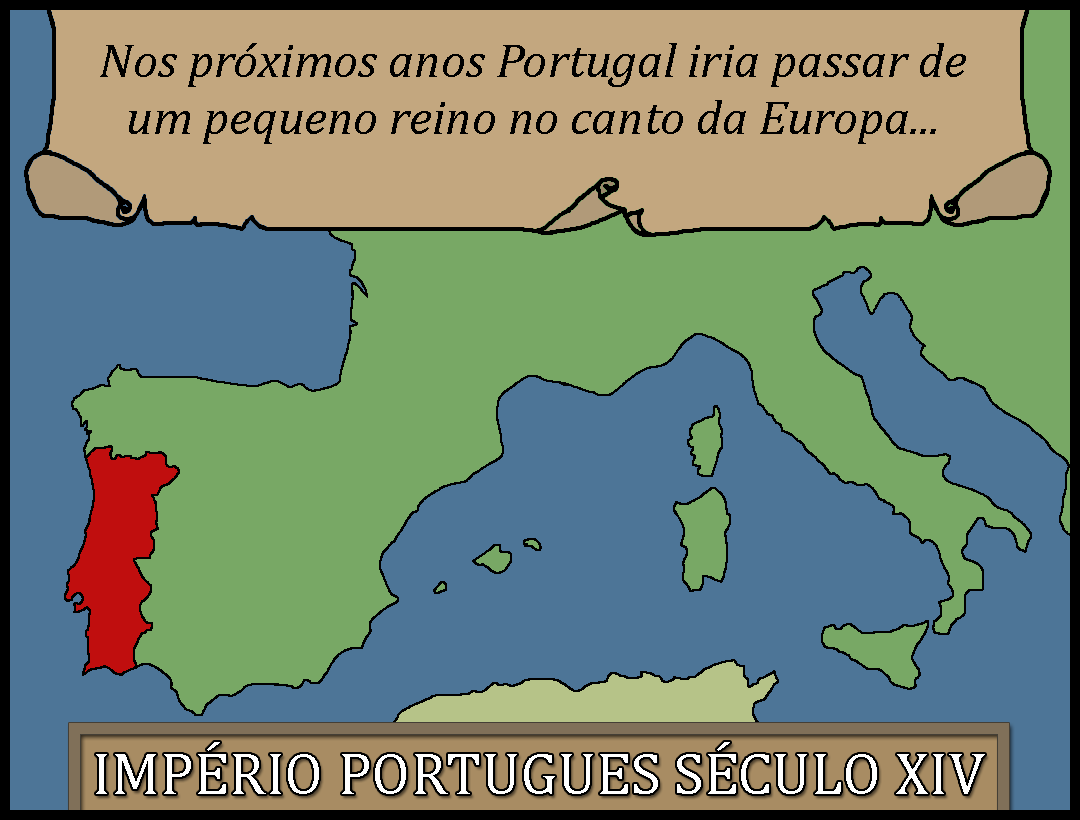
<style>
.page{position:relative;width:1080px;height:820px;background:#4d7597}
.page>*{position:absolute;margin:0}
.t1{font:48px "Cambria-Italic";color:#000000;scale:1.03 1}
.t2{font:60px "Cambria";color:#ffffff}
</style>
<div class="page">
<p class="t1" style="left:100px;top:43px;width:866px;height:101px;text-align:center">Nos próximos anos Portugal iria passar de um pequeno reino no canto da Europa...</p>
<p class="t2" style="left:96px;top:742px;width:889px;height:52px">IMPÉRIO PORTUGUES SÉCULO XIV</p>
</div>
